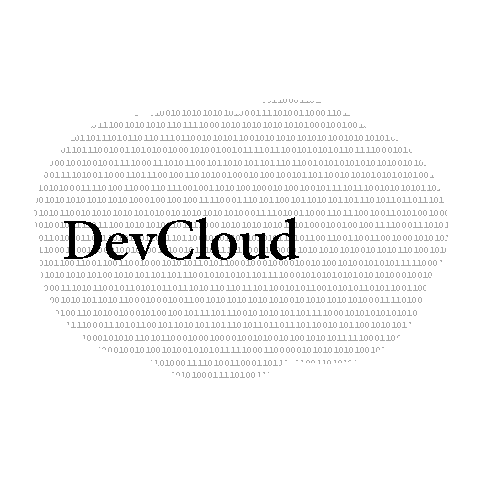
<style>
.page{position:relative;width:500px;height:500px;background:#ffffff}
.page>*{position:absolute;margin:0}
.t1{font:58.3px "MinionPro-Semibold";color:#000000}
</style>
<div class="page">
<p class="t1" style="left:64px;top:217px;width:235px;height:43px">DevCloud</p>
</div>
